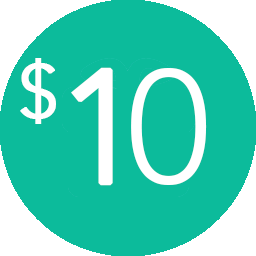
<style>
.page{position:relative;width:256px;height:256px;background:#0cbb9b}
.page>*{position:absolute;margin:0}
.t1{font:160px "Avenir-Light";letter-spacing:-0.12em;color:#ffffff;font-weight:bold}
.t2{font:128px "Avenir-Light";color:#ffffff;font-weight:bold}
</style>
<div class="page">
<p class="t1" style="left:20px;top:58px;width:187px;height:128px"><span class="t2">$</span>10</p>
</div>
